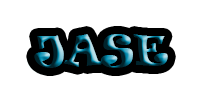
<style>
.page{position:relative;width:200px;height:100px;background:#ffffff}
.page>*{position:absolute;margin:0}
.t1{font:40px "Ravie"}
</style>
<div class="page">
<p class="t1" style="left:34px;top:34px;width:134px;height:34px">JASE</p>
</div>
